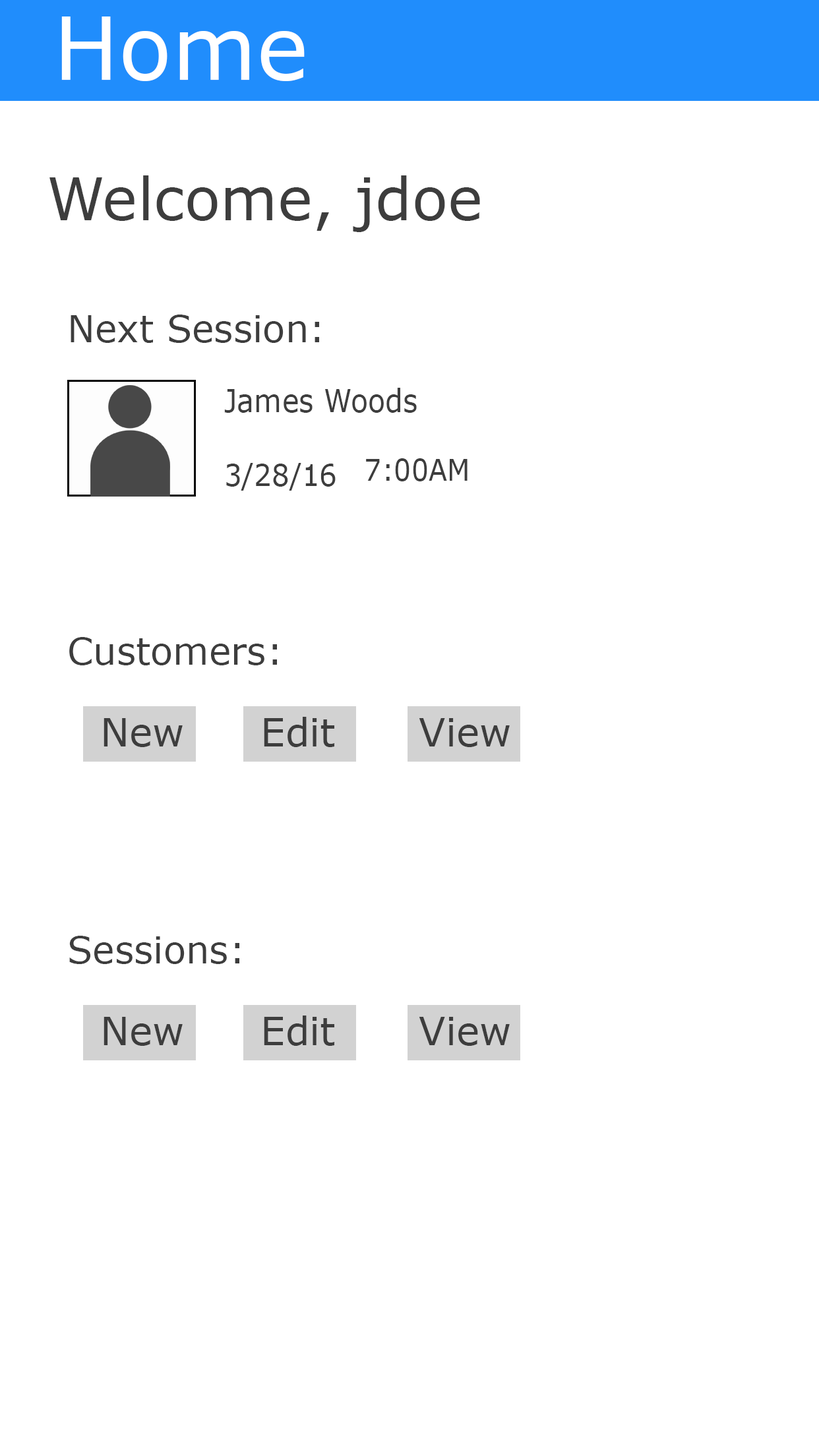
<style>
.page{position:relative;width:819px;height:1456px;background:#ffffff}
.page>*{position:absolute;margin:0}
.t1{font:87.2px "MSReferenceSansSerif";color:#ffffff}
.t2{font:59px "MSReferenceSansSerif";color:#3d3d3d}
.t3{font:37.1px "MSReferenceSansSerif";color:#3d3d3d}
.t4{font:31.4px "MSReferenceSansSerif";color:#3d3d3d;scale:0.91 1}
.t5{font:29.9px "MSReferenceSansSerif";color:#3d3d3d;scale:0.91 1}
.t6{font:30.4px "MSReferenceSansSerif";color:#3d3d3d;scale:0.91 1}
.t7{font:38.7px "MSReferenceSansSerif";color:#3d3d3d}
</style>
<div class="page">
<p class="t1" style="left:61px;top:16px;width:244px;height:65px">Home</p>
<p class="t2" style="left:49px;top:175px;width:431px;height:57px">Welcome, jdoe</p>
<p class="t3" style="left:71px;top:315px;width:248px;height:28px">Next Session:</p>
<p class="t4" style="left:224px;top:388px;width:193px;height:25px">James Woods</p>
<p class="t5" style="left:366px;top:458px;width:102px;height:23px">7:00AM</p>
<p class="t6" style="left:226px;top:463px;width:110px;height:28px">3/28/16</p>
<p class="t3" style="left:69px;top:637px;width:208px;height:28px">Customers:</p>
<p class="t7" style="left:104px;top:718px;width:79px;height:29px">New</p>
<p class="t7" style="left:264px;top:717px;width:70px;height:30px">Edit</p>
<p class="t7" style="left:419px;top:718px;width:91px;height:29px">View</p>
<p class="t3" style="left:69px;top:936px;width:170px;height:28px">Sessions:</p>
<p class="t7" style="left:104px;top:1017px;width:79px;height:29px">New</p>
<p class="t7" style="left:264px;top:1015px;width:70px;height:31px">Edit</p>
<p class="t7" style="left:419px;top:1017px;width:91px;height:29px">View</p>
</div>
